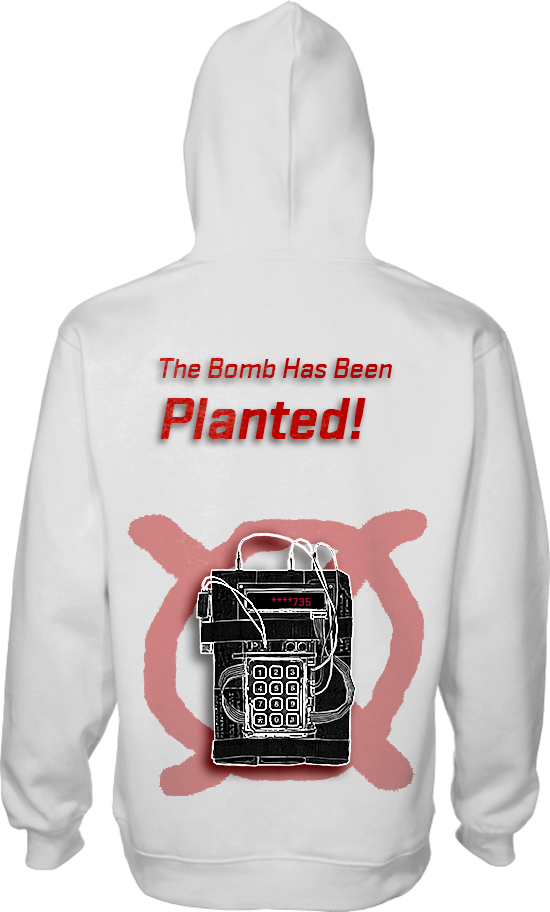
<style>
.page{position:relative;width:550px;height:912px;background:#ffffff}
.page>*{position:absolute;margin:0}
.t1{font:30px/60px "Stratum2-Medium";letter-spacing:-0.025em;color:#bc0900;font-style:italic}
.t2{font:60px/60px "Stratum2-Medium";letter-spacing:-0.025em;color:#bc0900;font-weight:bold;font-style:italic}
.t3{font:12.4px "Stratum2-Medium";color:#b20c33}
</style>
<div class="page">
<p class="t1" style="left:159px;top:358px;width:233px;height:81px">The Bomb Has Been<br><span class="t2">Planted!</span></p>
<p class="t3" style="left:271px;top:597px;width:40px;height:9px">735****</p>
</div>
